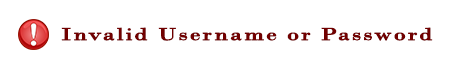
<style>
.page{position:relative;width:449px;height:67px;background:#ffffff}
.page>*{position:absolute;margin:0}
.t1{font:18.2px "BodoniMT";letter-spacing:0.06em;color:#710000;font-weight:bold;scale:1.35 1}
</style>
<div class="page">
<p class="t1" style="left:61px;top:27px;width:372px;height:14px">Invalid Username or Password</p>
</div>
